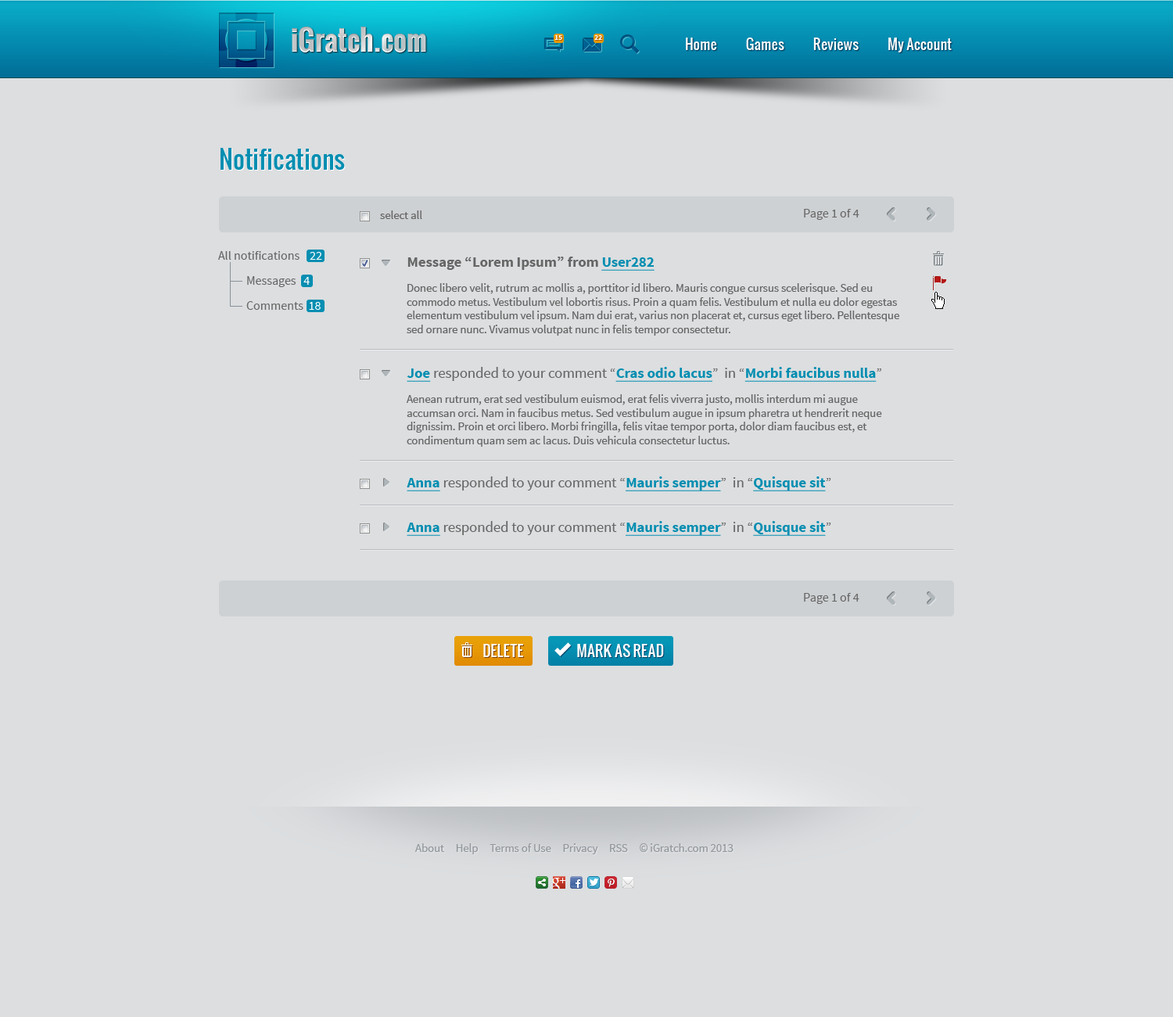
<style>
.page{position:relative;width:1173px;height:1017px;background:#dcdee0}
.page>*{position:absolute;margin:0}
.t1{font:28.2px "Oswald-Bold";color:#c2c6c8}
.t2{font:7.3px "SourceSansPro-Bold";color:#ffffff}
.t3{font:14.1px "Oswald";color:#fffefe}
.t4{font:25px "Oswald";color:#048eb1}
.t5{font:12.5px "SourceSansPro-Regular";color:#666666}
.t6{font:11.5px "SourceSansPro-Regular";color:#666666}
.t7{font:12.5px/25px "SourceSansPro-Regular";color:#666666}
.t8{font:12.5px/25px "SourceSansPro-Regular";color:#ffffff}
.t9{font:14.6px "SourceSansPro-Bold";color:#666666}
.t10{font:14.6px "SourceSansPro-Bold";color:#048eb1;text-decoration:underline}
.t11{font:14.6px "SourceSansPro-Regular";color:#666666}
.t12{font:14.6px "Oswald";color:#ffffff}
.t13{font:11.5px "SourceSansPro-Regular";color:#94989d}
</style>
<div class="page">
<p class="t1" style="left:292px;top:27px;width:134px;height:25px">iGratch.com</p>
<p class="t2" style="left:554px;top:35px;width:8px;height:5px">15</p>
<p class="t2" style="left:594px;top:35px;width:8px;height:5px">22</p>
<p class="t3" style="left:686px;top:38px;width:266px;height:14px">Home            Games            Reviews            My Account</p>
<p class="t4" style="left:221px;top:148px;width:124px;height:22px">Notifications</p>
<p class="t5" style="left:804px;top:209px;width:55px;height:11px">Page 1 of 4</p>
<p class="t6" style="left:380px;top:210px;width:42px;height:9px">select all</p>
<p class="t7" style="left:218px;top:251px;width:104px;height:59px">All notifications    <span class="t8">22<br></span> Messages   <span class="t8">4<br></span> Comments  <span class="t8">18</span></p>
<p class="t9" style="left:407px;top:256px;width:248px;height:15px">Message “Lorem Ipsum” from <span class="t10">User282</span></p>
<p class="t6" style="left:407px;top:283px;width:492px;height:52px">Donec libero velit, rutrum ac mollis a, porttitor id libero. Mauris congue cursus scelerisque. Sed eu commodo metus. Vestibulum vel lobortis risus. Proin a quam felis. Vestibulum et nulla eu dolor egestas elementum vestibulum vel ipsum. Nam dui erat, varius non placerat et, cursus eget libero. Pellentesque sed ornare nunc. Vivamus volutpat nunc in felis tempor consectetur.</p>
<p class="t11" style="left:407px;top:367px;width:474px;height:15px"><span class="t10">Joe </span>responded to your comment “<span class="t10">Cras odio lacus</span>”  in “<span class="t10">Morbi faucibus nulla</span>”</p>
<p class="t6" style="left:406px;top:394px;width:476px;height:53px">Aenean rutrum, erat sed vestibulum euismod, erat felis viverra justo, mollis interdum mi augue accumsan orci. Nam in faucibus metus. Sed vestibulum augue in ipsum pharetra ut hendrerit neque dignissim. Proin et orci libero. Morbi fringilla, felis vitae tempor porta, dolor diam faucibus est, et condimentum quam sem ac lacus. Duis vehicula consectetur luctus.</p>
<p class="t11" style="left:407px;top:476px;width:424px;height:15px"><span class="t10">Anna </span>responded to your comment “<span class="t10">Mauris semper</span>”  in “<span class="t10">Quisque sit</span>”</p>
<p class="t11" style="left:407px;top:521px;width:424px;height:15px"><span class="t10">Anna </span>responded to your comment “<span class="t10">Mauris semper</span>”  in “<span class="t10">Quisque sit</span>”</p>
<p class="t5" style="left:804px;top:593px;width:55px;height:11px">Page 1 of 4</p>
<p class="t12" style="left:483px;top:644px;width:40px;height:13px">DELETE</p>
<p class="t12" style="left:577px;top:644px;width:87px;height:13px">MARK AS READ</p>
<p class="t13" style="left:414px;top:843px;width:320px;height:11px">About     Help     Terms of Use     Privacy     RSS     © iGratch.com 2013</p>
</div>
